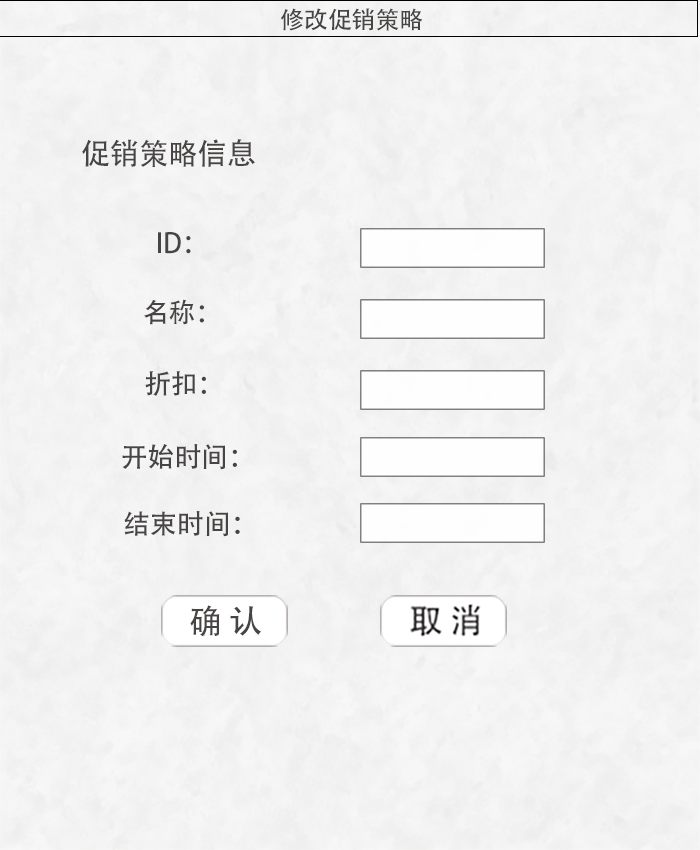
<style>
.page{position:relative;width:700px;height:850px}
.page>*{position:absolute;margin:0}
.t1{font:24px "AdobeHeitiStd-Regular";letter-spacing:-0.005em;color:#474444;text-transform:uppercase}
.t2{font:29.7px "AdobeHeitiStd-Regular";letter-spacing:-0.005em;color:#474444;text-transform:uppercase}
.t3{font:27px "AdobeHeitiStd-Regular";letter-spacing:-0.005em;color:#474444;text-transform:uppercase}
</style>
<div class="page">
<p class="t1" style="left:280px;top:8px;width:143px;height:23px">修改促销策略</p>
<p class="t2" style="left:82px;top:139px;width:173px;height:28px">促销策略信息</p>
<p class="t3" style="left:158px;top:232px;width:33px;height:22px">ID：</p>
<p class="t3" style="left:144px;top:299px;width:60px;height:26px">名称：</p>
<p class="t3" style="left:145px;top:371px;width:61px;height:25px">折扣：</p>
<p class="t3" style="left:122px;top:444px;width:115px;height:26px">开始时间：</p>
<p class="t3" style="left:124px;top:511px;width:116px;height:26px">结束时间：</p>
</div>
